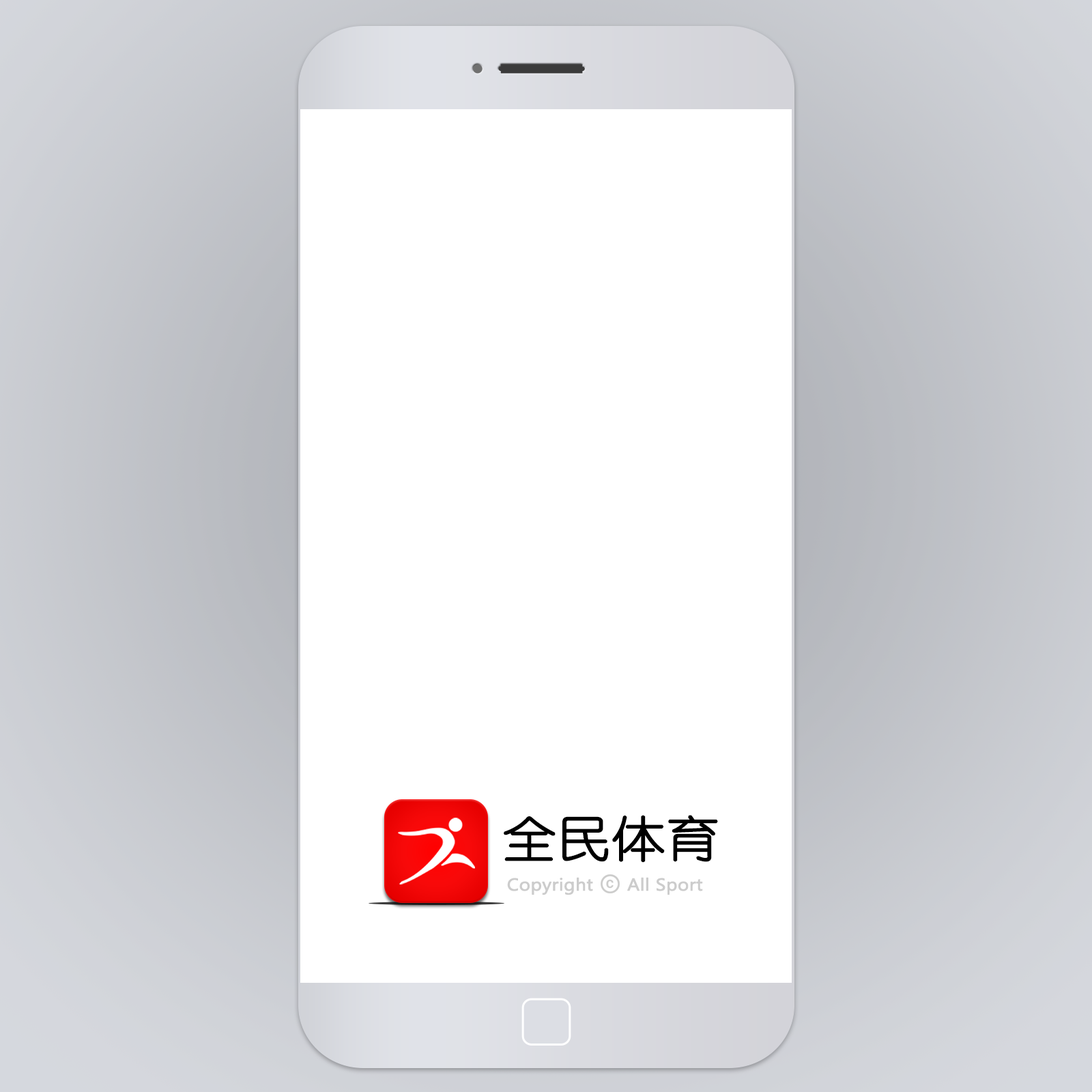
<style>
.page{position:relative;width:1092px;height:1092px;background:#ffffff}
.page>*{position:absolute;margin:0}
.t1{font:48.3px "YouYuan";color:#000000;font-weight:bold;scale:1.1 1}
.t2{font:17.1px "Ebrima";color:#cccccc;font-weight:bold;scale:1.1 1}
</style>
<div class="page">
<p class="t1" style="left:504px;top:815px;width:214px;height:48px">全民体育</p>
<p class="t2" style="left:507px;top:877px;width:196px;height:18px">Copyright      All Sport</p>
</div>
